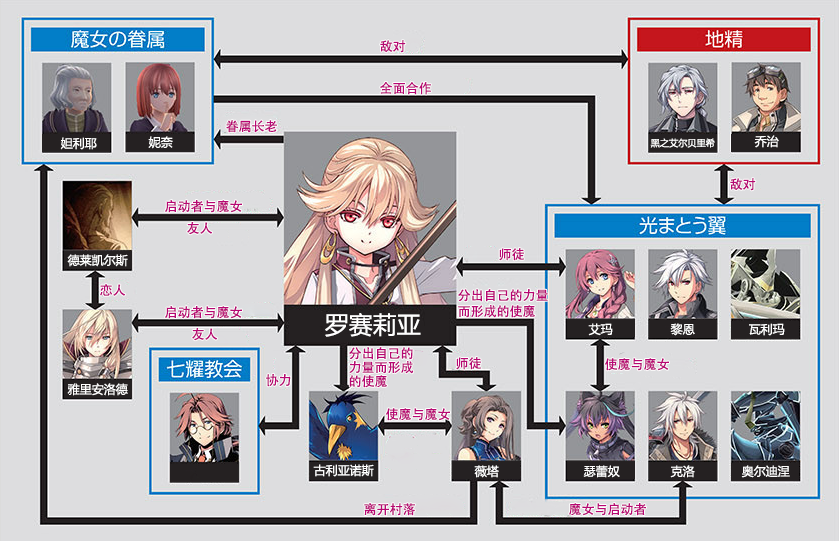
<style>
.page{position:relative;width:839px;height:541px;background:#dddddf}
.page>*{position:absolute;margin:0}
.t1{font:13px "AdobeHeitiStd-Regular";color:#b70773}
.t2{font:12px "MicrosoftYaHei";color:#ffffff}
.t3{font:9.2px "MicrosoftYaHei";color:#ffffff}
.t4{font:13px/16px "AdobeHeitiStd-Regular";color:#b70773}
.t5{font:24px "MicrosoftYaHei";color:#ffffff}
.t6{font:13px/14px "AdobeHeitiStd-Regular";color:#b70773}
</style>
<div class="page">
<p class="t1" style="left:380px;top:40px;width:26px;height:13px">敌对</p>
<p class="t1" style="left:380px;top:82px;width:51px;height:13px">全面合作</p>
<p class="t1" style="left:226px;top:120px;width:51px;height:13px">眷属长老</p>
<p class="t2" style="left:60px;top:137px;width:37px;height:13px">妲利耶</p>
<p class="t2" style="left:148px;top:136px;width:25px;height:13px">妮奈</p>
<p class="t2" style="left:754px;top:135px;width:25px;height:13px">乔治</p>
<p class="t3" style="left:650px;top:138px;width:65px;height:10px">黑之艾尔贝里希</p>
<p class="t1" style="left:730px;top:178px;width:26px;height:13px">敌对</p>
<p class="t1" style="left:165px;top:200px;width:77px;height:13px">启动者与魔女</p>
<p class="t1" style="left:187px;top:222px;width:26px;height:13px">友人</p>
<p class="t2" style="left:67px;top:254px;width:61px;height:13px">德莱凯尔斯</p>
<p class="t1" style="left:499px;top:248px;width:25px;height:13px">师徒</p>
<p class="t1" style="left:100px;top:284px;width:26px;height:12px">恋人</p>
<p class="t4" style="left:458px;top:289px;width:90px;height:29px">分出自己的力量<br>而形成的使魔</p>
<p class="t1" style="left:165px;top:306px;width:77px;height:13px">启动者与魔女</p>
<p class="t5" style="left:325px;top:313px;width:96px;height:24px">罗赛莉亚</p>
<p class="t1" style="left:192px;top:328px;width:26px;height:13px">友人</p>
<p class="t2" style="left:588px;top:323px;width:25px;height:13px">艾玛</p>
<p class="t2" style="left:670px;top:323px;width:25px;height:13px">黎恩</p>
<p class="t2" style="left:749px;top:323px;width:36px;height:13px">瓦利玛</p>
<p class="t6" style="left:349px;top:347px;width:65px;height:41px">分出自己的<br>力量而形成<br>的使魔</p>
<p class="t1" style="left:456px;top:357px;width:25px;height:13px">师徒</p>
<p class="t1" style="left:605px;top:358px;width:64px;height:13px">使魔与魔女</p>
<p class="t1" style="left:266px;top:374px;width:25px;height:13px">协力</p>
<p class="t2" style="left:67px;top:383px;width:61px;height:13px">雅里安洛德</p>
<p class="t1" style="left:386px;top:408px;width:64px;height:13px">使魔与魔女</p>
<p class="t2" style="left:313px;top:464px;width:61px;height:13px">古利亚诺斯</p>
<p class="t2" style="left:474px;top:465px;width:25px;height:13px">薇塔</p>
<p class="t2" style="left:583px;top:465px;width:37px;height:13px">瑟蕾奴</p>
<p class="t2" style="left:670px;top:465px;width:25px;height:13px">克洛</p>
<p class="t2" style="left:741px;top:465px;width:49px;height:13px">奥尔迪涅</p>
<p class="t1" style="left:364px;top:503px;width:51px;height:13px">离开村落</p>
<p class="t1" style="left:569px;top:503px;width:77px;height:13px">魔女与启动者</p>
</div>
